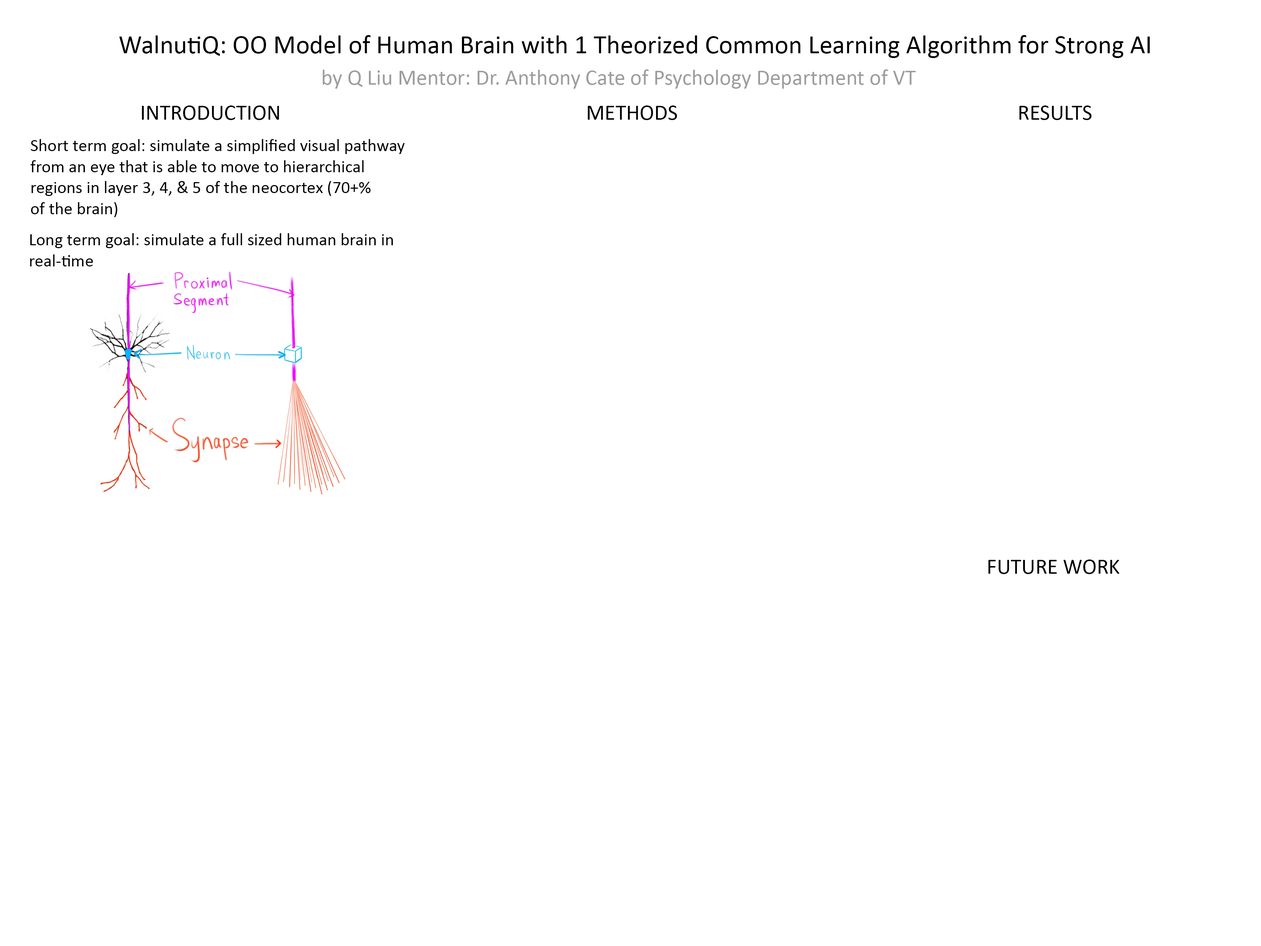
<style>
.page{position:relative;width:1261px;height:946px;background:#ffffff}
.page>*{position:absolute;margin:0}
.t1{font:26.3px "Calibri";color:#000000}
.t2{font:21.9px "Calibri";color:#9d9d9d}
.t3{font:21.9px "Calibri";color:#000000}
.t4{font:17.5px "Calibri";color:#000000}
</style>
<div class="page">
<p class="t1" style="left:119px;top:35px;width:1031px;height:23px">WalnutiQ: OO Model of Human Brain with 1 Theorized Common Learning Algorithm for Strong AI</p>
<p class="t2" style="left:323px;top:69px;width:593px;height:20px">by Q Liu Mentor: Dr. Anthony Cate of Psychology Department of VT</p>
<p class="t3" style="left:142px;top:105px;width:137px;height:15px">INTRODUCTION</p>
<p class="t3" style="left:588px;top:105px;width:89px;height:15px">METHODS</p>
<p class="t3" style="left:1019px;top:105px;width:73px;height:15px">RESULTS</p>
<p class="t4" style="left:30px;top:139px;width:375px;height:78px">Short term goal: simulate a simplified visual pathway <br>from an eye that is able to move to hierarchical <br>regions in layer 3, 4, &amp; 5 of the neocortex (70+% <br>of the brain)</p>
<p class="t4" style="left:30px;top:233px;width:363px;height:33px">Long term goal: simulate a full sized human brain in <br>real-time</p>
<p class="t3" style="left:988px;top:559px;width:131px;height:15px">FUTURE WORK</p>
</div>
